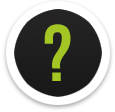
<style>
.page{position:relative;width:115px;height:112px;background:#ffffff}
.page>*{position:absolute;margin:0}
.t1{font:80px "BebasNeue";color:#a4c625}
</style>
<div class="page">
<p class="t1" style="left:44px;top:24px;width:27px;height:57px">?</p>
</div>
